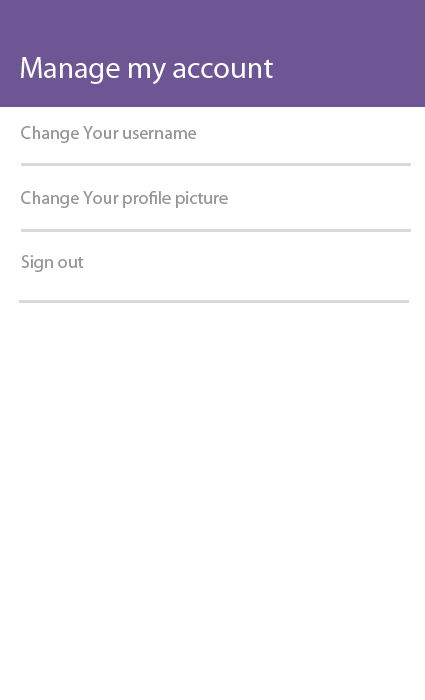
<style>
.page{position:relative;width:425px;height:700px;background:#ffffff}
.page>*{position:absolute;margin:0}
.t1{font:30px "MyriadPro-Regular";color:#ffffff}
.t2{font:18px "MyriadPro-Regular";color:#949494}
.t3{font:18px "MyriadPro-Regular";color:#969696}
</style>
<div class="page">
<p class="t1" style="left:21px;top:57px;width:252px;height:28px">Manage my account</p>
<p class="t2" style="left:21px;top:126px;width:175px;height:17px">Change Your username</p>
<p class="t3" style="left:21px;top:191px;width:207px;height:17px">Change Your profile picture</p>
<p class="t3" style="left:21px;top:255px;width:63px;height:17px">Sign out</p>
</div>
